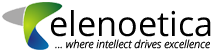
<style>
.page{position:relative;width:213px;height:53px;background:#ffffff}
.page>*{position:absolute;margin:0}
.t1{font:34.3px "OpenSans";color:#000000}
.t2{font:11px "OpenSansLight-Italic";color:#000000}
</style>
<div class="page">
<p class="t1" style="left:51px;top:10px;width:160px;height:27px">elenoetica</p>
<p class="t2" style="left:55px;top:39px;width:155px;height:10px">... where intellect drives excellence</p>
</div>
